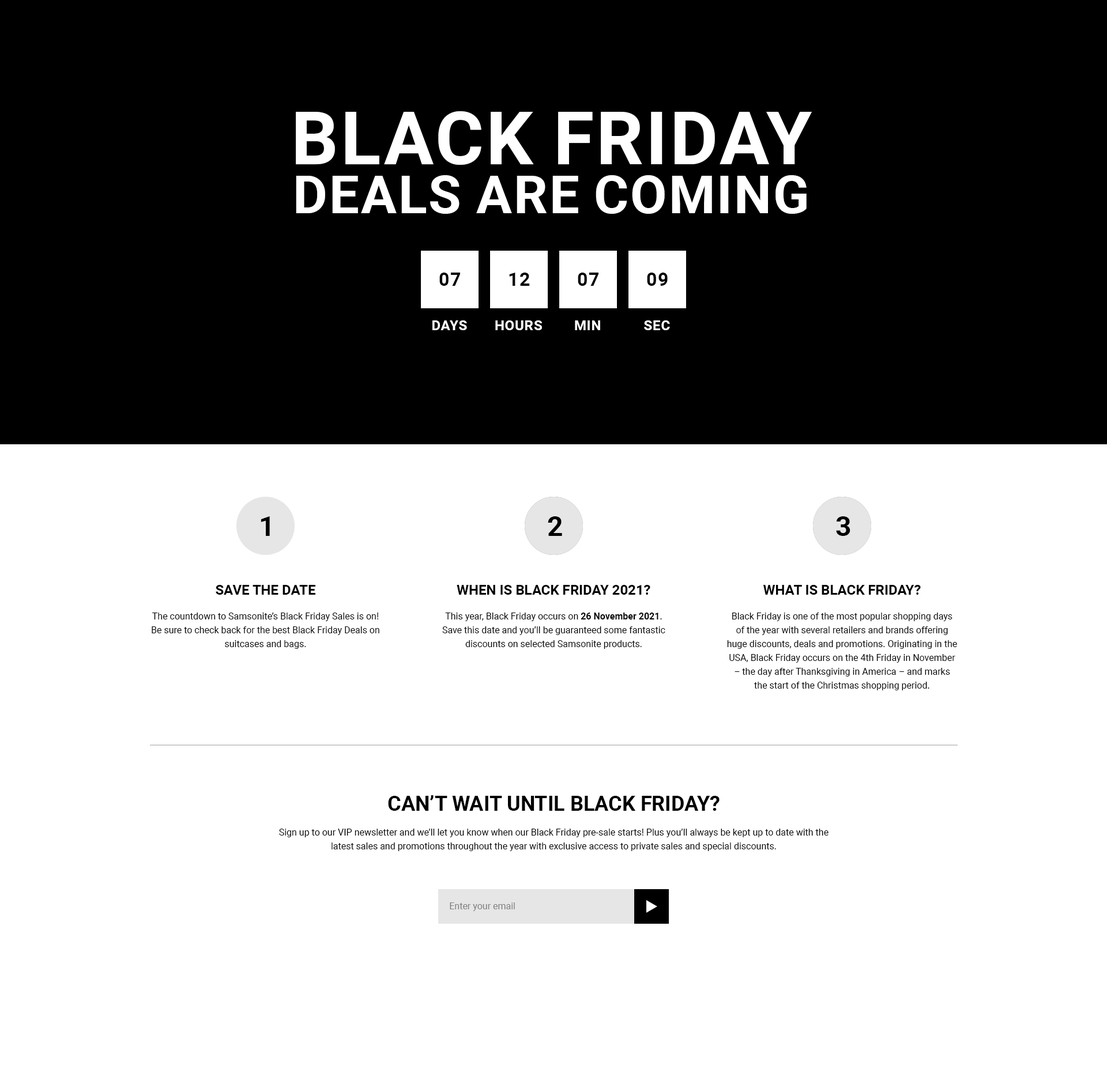
<style>
.page{position:relative;width:1107px;height:1077px;background:#ffffff}
.page>*{position:absolute;margin:0}
.t1{font:73.5px "Roboto-Bold";color:#ffffff;text-transform:uppercase}
.t2{font:52.8px "Roboto-Bold";color:#ffffff;text-transform:uppercase}
.t3{font:18.4px "Roboto-Bold";color:#000000;text-transform:uppercase}
.t4{font:13.8px "Roboto-Bold";color:#ffffff;text-transform:uppercase}
.t5{font:27.7px "Roboto-Bold";color:#000000}
.t6{font:9.2px/13.8px "Roboto-Regular";color:#000000}
.t7{font:13.8px "Roboto-Bold";color:#000000}
.t8{font:9.2px/13.8px "Roboto-Bold";color:#000000}
.t9{font:20.8px "Roboto-Bold";color:#000000}
.t10{font:9.2px "Roboto-Regular";color:#808080}
</style>
<div class="page">
<p class="t1" style="left:296px;top:111px;width:516px;height:54px">Black Friday</p>
<p class="t2" style="left:296px;top:175px;width:510px;height:39px">deals are coming</p>
<p class="t3" style="left:439px;top:273px;width:21px;height:13px">07</p>
<p class="t3" style="left:509px;top:273px;width:21px;height:13px">12</p>
<p class="t3" style="left:578px;top:273px;width:20px;height:13px">07</p>
<p class="t3" style="left:647px;top:273px;width:21px;height:13px">09</p>
<p class="t4" style="left:432px;top:321px;width:35px;height:9px">days</p>
<p class="t4" style="left:495px;top:321px;width:47px;height:9px">hours</p>
<p class="t4" style="left:575px;top:321px;width:25px;height:9px">MIN</p>
<p class="t4" style="left:644px;top:321px;width:26px;height:9px">SEC</p>
<p class="t5" style="left:261px;top:516px;width:9px;height:20px">1</p>
<p class="t5" style="left:548px;top:516px;width:14px;height:20px">2</p>
<p class="t5" style="left:836px;top:516px;width:14px;height:20px">3</p>
<p class="t6" style="left:152px;top:585px;width:227px;height:64px;text-align:center"><span class="t7">SAVE THE DATE<br><br></span>The countdown to Samsonite’s Black Friday Sales is on!<br>Be sure to check back for the best Black Friday Deals on suitcases and bags.</p>
<p class="t6" style="left:442px;top:585px;width:223px;height:64px;text-align:center"><span class="t7">WHEN IS BLACK FRIDAY 2021?<br><br></span>This year, Black Friday occurs on <span class="t8">26 November 2021</span>. Save this date and you’ll be guaranteed some fantastic discounts on selected Samsonite products.</p>
<p class="t6" style="left:727px;top:585px;width:230px;height:106px;text-align:center"><span class="t7">WHAT IS BLACK FRIDAY?<br><br></span>Black Friday is one of the most popular shopping days of the year with several retailers and brands offering huge discounts, deals and promotions. Originating in the USA, Black Friday occurs on the 4th Friday in November – the day after Thanksgiving in America – and marks the start of the Christmas shopping period.</p>
<p class="t6" style="left:279px;top:796px;width:549px;height:55px;text-align:center"><span class="t9">CAN’T WAIT UNTIL BLACK FRIDAY?<br><br></span>Sign up to our VIP newsletter and we’ll let you know when our Black Friday pre-sale starts! Plus you’ll always be kept up to date with the latest sales and promotions throughout the year with exclusive access to private sales and special discounts.</p>
<p class="t10" style="left:450px;top:903px;width:65px;height:8px">Enter your email</p>
</div>
